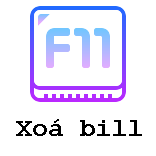
<style>
.page{position:relative;width:156px;height:156px;background:#ffffff}
.page>*{position:absolute;margin:0}
.t1{font:26px "CourierNewPS-BoldMT";color:#000000}
</style>
<div class="page">
<p class="t1" style="left:16px;top:119px;width:126px;height:17px">Xoá bill</p>
</div>
